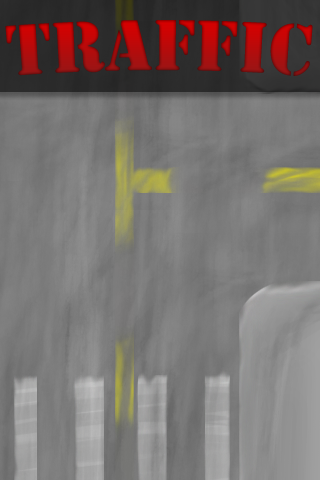
<style>
.page{position:relative;width:320px;height:480px}
.page>*{position:absolute;margin:0}
.t1{font:67px "StencilStd";color:#b80000}
</style>
<div class="page">
<p class="t1" style="left:5px;top:20px;width:308px;height:56px">traffic</p>
</div>
